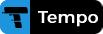
<style>
.page{position:relative;width:103px;height:34px;background:#000000}
.page>*{position:absolute;margin:0}
.t1{font:17px "Alexandria-Regular";color:#ffffff;font-weight:bold}
</style>
<div class="page">
<p class="t1" style="left:37px;top:11px;width:62px;height:16px">Tempo</p>
</div>
